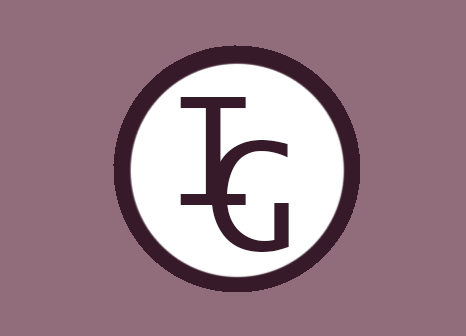
<style>
.page{position:relative;width:466px;height:336px;background:#916d7b}
.page>*{position:absolute;margin:0}
.t1{font:150px "LucidaSans-Typewriter";color:#371a29}
</style>
<div class="page">
<p class="t1" style="left:180px;top:97px;width:66px;height:108px">I</p>
<p class="t1" style="left:211px;top:140px;width:78px;height:112px">G</p>
</div>
